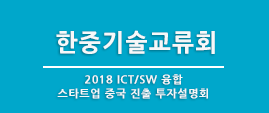
<style>
.page{position:relative;width:269px;height:113px;background:#00a7cb}
.page>*{position:absolute;margin:0}
.t1{font:24px "NanumGothicExtraBold";letter-spacing:0.05em;color:#f6f8f9}
.t2{font:11px/14px "NanumGothicExtraBold";letter-spacing:0.05em;color:#f6f8f9}
</style>
<div class="page">
<p class="t1" style="left:56px;top:30px;width:159px;height:24px">한중기술교류회</p>
<p class="t2" style="left:57px;top:74px;width:151px;height:25px;text-align:center">2018 ICT/SW 융합 <br>스타트업 중국 진출 투자설명회</p>
</div>
